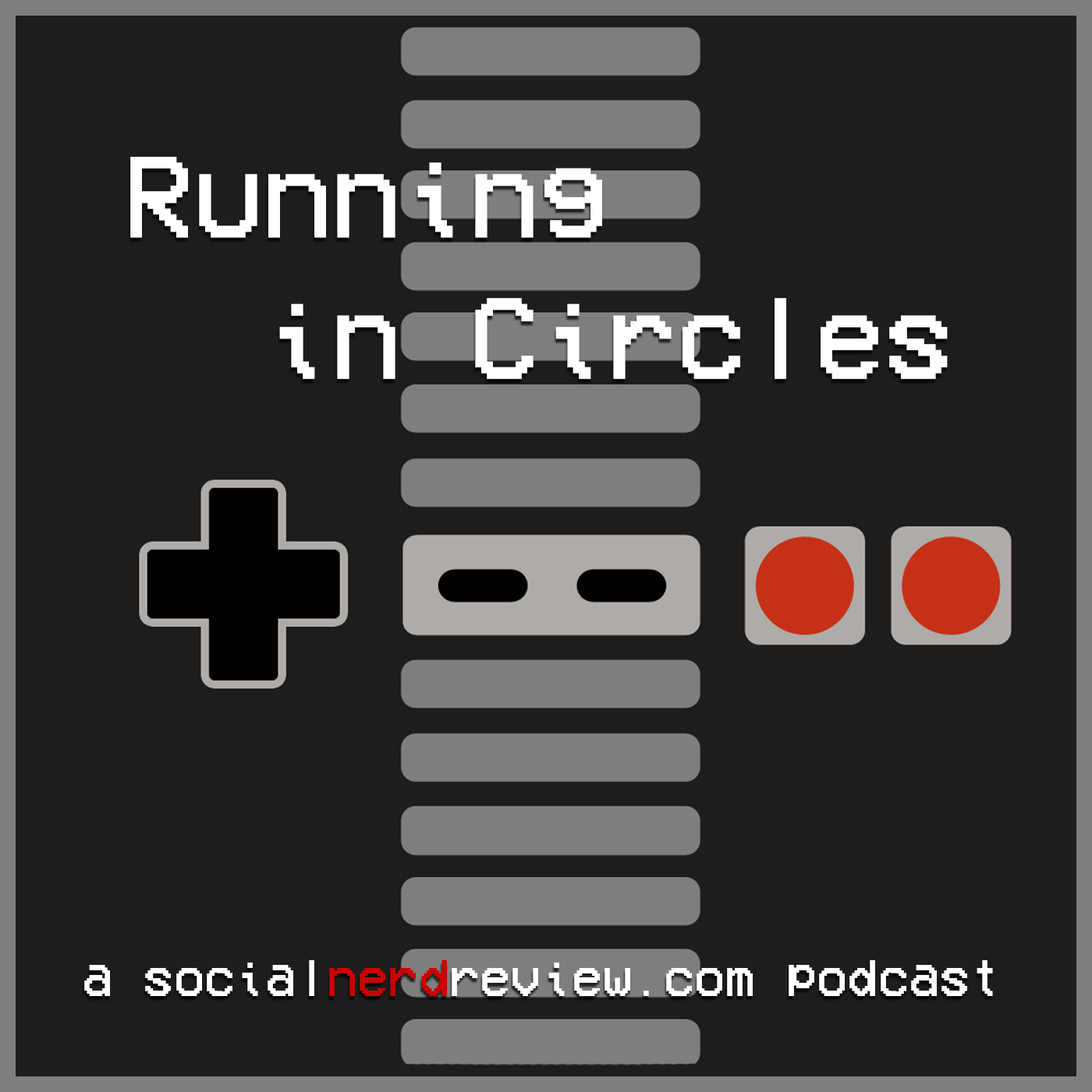
<style>
.page{position:relative;width:1092px;height:1092px;background:#1d1d1d}
.page>*{position:absolute;margin:0}
.t1{font:117.8px "VCROSDMono";color:#ffffff}
.t2{font:52.3px "VCROSDMono";color:#ffffff}
.t3{font:52.3px "VCROSDMono";color:#cc0000}
</style>
<div class="page">
<p class="t1" style="left:130px;top:157px;width:818px;height:222px">Running<br>  in Circles</p>
<p class="t2" style="left:84px;top:960px;width:909px;height:36px">a social<span class="t3">nerd</span>review.com podcast</p>
</div>
